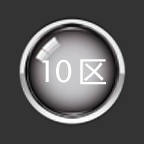
<style>
.page{position:relative;width:144px;height:144px;background:#333333}
.page>*{position:absolute;margin:0}
.t1{font:30px "LucidaSansUnicode";letter-spacing:-0.1em;color:#ffffff}
.t2{font:30px "MicrosoftYaHei";letter-spacing:-0.1em;color:#ffffff}
</style>
<div class="page">
<p class="t1" style="left:42px;top:59px;width:64px;height:26px">10<span class="t2">区</span></p>
</div>
